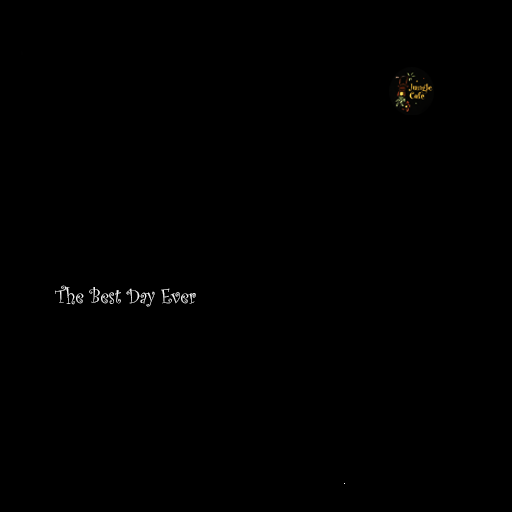
<style>
.page{position:relative;width:512px;height:512px;background:#000000}
.page>*{position:absolute;margin:0}
.t1{font:21.6px "CurlzMT";color:#f3f3f3;scale:0.92 1}
</style>
<div class="page">
<p class="t1" style="left:55px;top:285px;width:141px;height:22px">The Best Day Ever</p>
</div>
